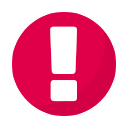
<style>
.page{position:relative;width:128px;height:128px;background:#ffffff}
.page>*{position:absolute;margin:0}
.t1{font:103px "Bungee-Regular";color:#ffffff}
</style>
<div class="page">
<p class="t1" style="left:50px;top:26px;width:27px;height:76px">!</p>
</div>
